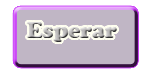
<style>
.page{position:relative;width:150px;height:75px;background:#c0b6c5}
.page>*{position:absolute;margin:0}
.t1{font:22.5px "CooperBlack";color:#bab8b8}
</style>
<div class="page">
<p class="t1" style="left:27px;top:22px;width:90px;height:20px">Esperarar</p>
</div>
